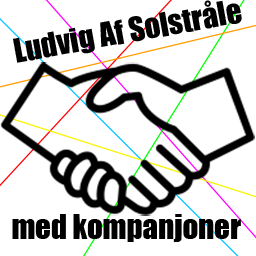
<style>
.page{position:relative;width:256px;height:256px;background:#ffffff}
.page>*{position:absolute;margin:0}
.t1{font:30.7px "Impact";color:#010101}
.t2{font:30.7px "Impact";color:#000000}
</style>
<div class="page">
<p class="t1" style="left:13px;top:0px;width:229px;height:63px;rotate:-10deg">Ludvig Af Solstråle</p>
<p class="t2" style="left:12px;top:214px;width:229px;height:28px">med kompanjoner</p>
</div>
